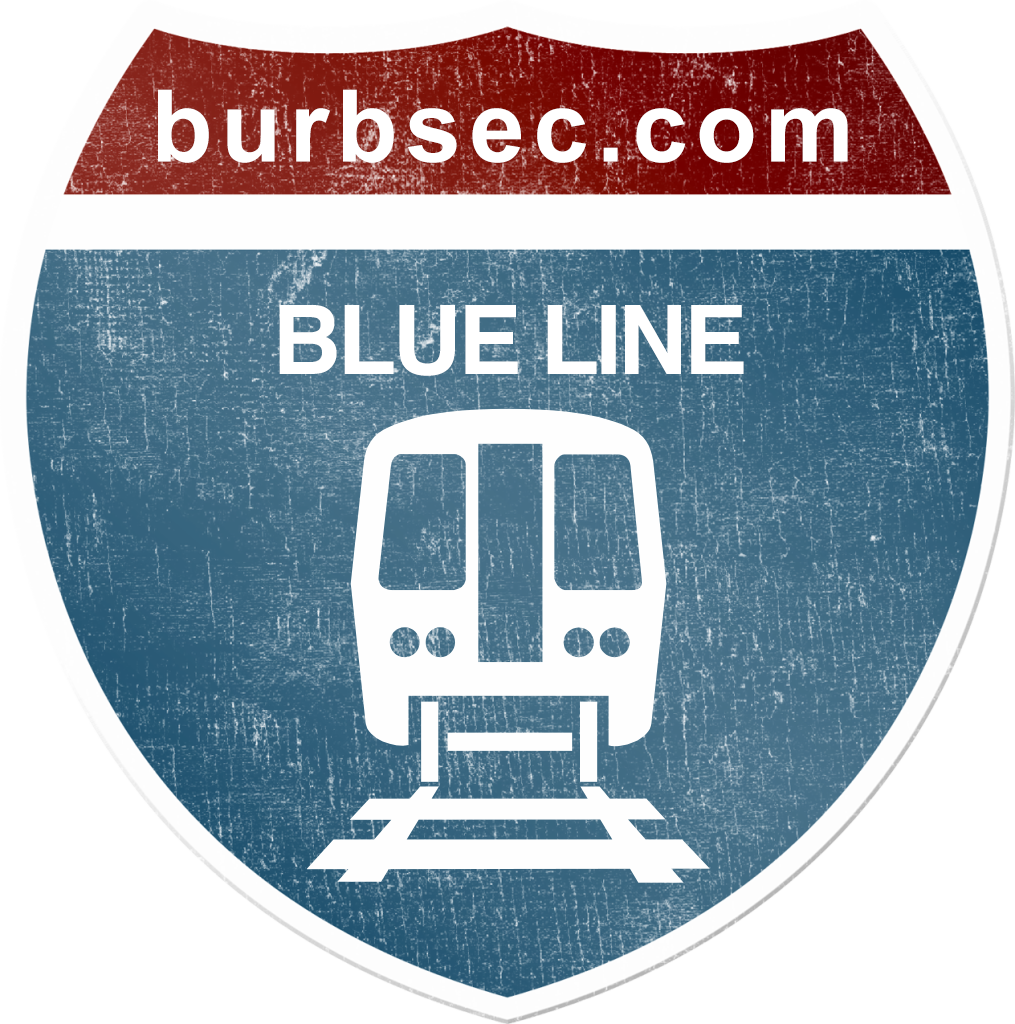
<style>
.page{position:relative;width:1015px;height:1024px;background:#ffffff}
.page>*{position:absolute;margin:0}
.t1{font:100px "Arial-BoldMT";letter-spacing:0.08em;color:#ffffff}
.t2{font:95.8px "Helvetica-Bold";letter-spacing:-0.04em;color:#ffffff}
</style>
<div class="page">
<p class="t1" style="left:158px;top:89px;width:690px;height:74px">burbsec.com</p>
<p class="t2" style="left:279px;top:305px;width:465px;height:71px">BLUE LINE</p>
</div>
